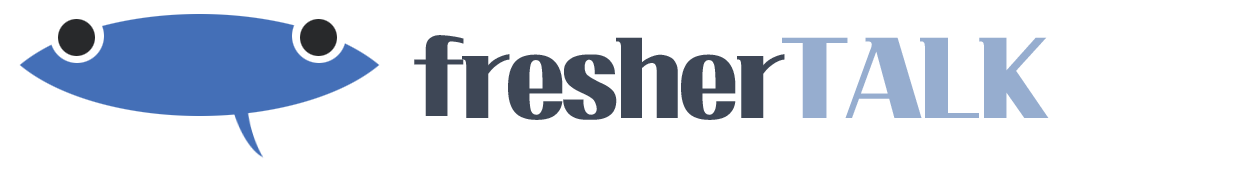
<style>
.page{position:relative;width:1236px;height:173px;background:#ffffff}
.page>*{position:absolute;margin:0}
.t1{font:100px "KoreanBDCS-R";letter-spacing:-0.05em;color:#3e4756}
.t2{font:100px "KoreanBDCS-R";letter-spacing:-0.05em;color:#96adcf}
</style>
<div class="page">
<p class="t1" style="left:414px;top:35px;width:635px;height:85px">fresher<span class="t2">TALK</span></p>
</div>
